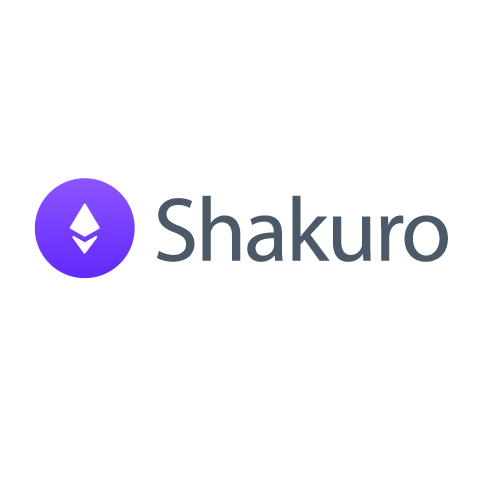
<style>
.page{position:relative;width:500px;height:500px;background:#ffffff}
.page>*{position:absolute;margin:0}
.t1{font:91.1px "SFProDisplay-Semibold";letter-spacing:-0.025em;color:#4c5968}
</style>
<div class="page">
<p class="t1" style="left:157px;top:195px;width:291px;height:67px">Shakuro</p>
</div>
